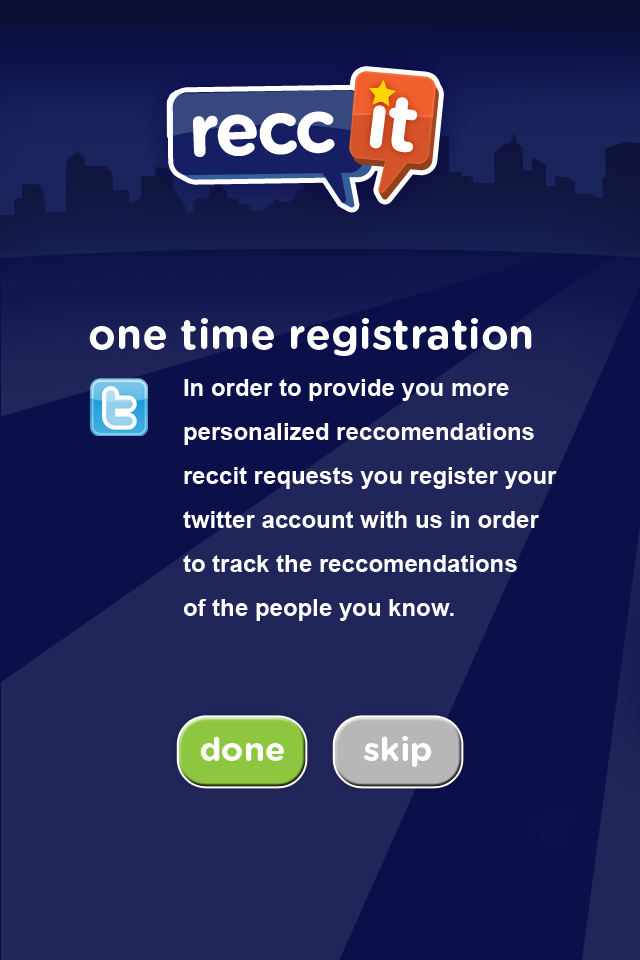
<style>
.page{position:relative;width:640px;height:960px;background:#21265a}
.page>*{position:absolute;margin:0}
.t1{font:41.8px "GothamRounded-Bold";color:#ffffff}
.t2{font:24px/44px "Arial-BoldMT";color:#ffffff}
.t3{font:33.7px "GothamRounded-Bold";color:#ffffff}
</style>
<div class="page">
<p class="t1" style="left:89px;top:318px;width:443px;height:38px">one time registration</p>
<p class="t2" style="left:183px;top:379px;width:374px;height:242px">In order to provide you more <br>personalized reccomendations <br>reccit requests you register your <br>twitter account with us in order <br>to track the reccomendations <br>of the people you know.</p>
<p class="t3" style="left:200px;top:736px;width:84px;height:25px">done</p>
<p class="t3" style="left:364px;top:736px;width:68px;height:31px">skip</p>
</div>
